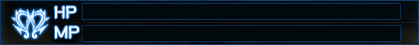
<style>
.page{position:relative;width:419px;height:45px;background:#01090d}
.page>*{position:absolute;margin:0}
.t1{font:16px "MDArt";color:#f6fafe}
</style>
<div class="page">
<p class="t1" style="left:54px;top:6px;width:23px;height:13px">HP</p>
<p class="t1" style="left:54px;top:26px;width:25px;height:13px">MP</p>
</div>
